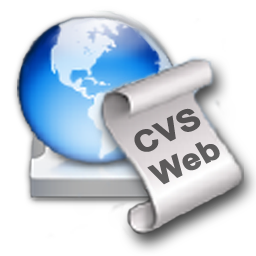
<style>
.page{position:relative;width:256px;height:256px;background:#ffffff}
.page>*{position:absolute;margin:0}
.t1{font:30px "Arial-BoldMT";color:#5c595a;font-weight:bold;scale:1.1 1}
</style>
<div class="page">
<p class="t1" style="left:134px;top:108px;width:86px;height:77px;rotate:-26deg">CVS<br>Web</p>
</div>
